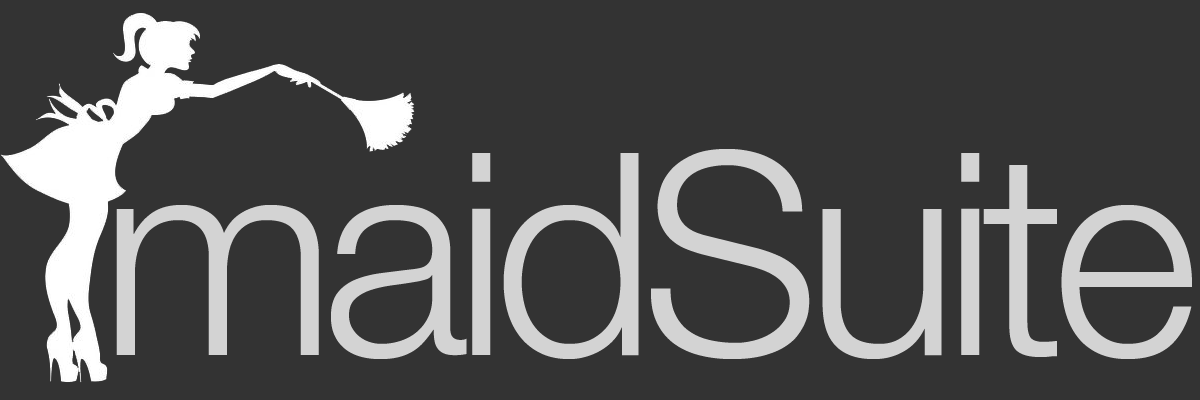
<style>
.page{position:relative;width:1200px;height:400px;background:#333333}
.page>*{position:absolute;margin:0}
.t1{font:283.3px "HelveticaNeue-Light";letter-spacing:-0.05em;color:#d3d3d3}
</style>
<div class="page">
<p class="t1" style="left:116px;top:149px;width:1076px;height:210px">maidSuite</p>
</div>
